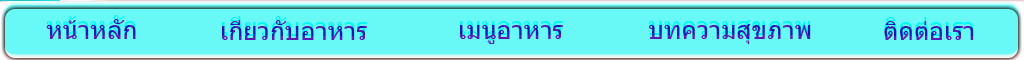
<style>
.page{position:relative;width:1024px;height:60px;background:#68f8f5}
.page>*{position:absolute;margin:0}
.t1{font:25px "Tahoma"}
</style>
<div class="page">
<p class="t1" style="left:46px;top:15px;width:90px;height:20px">หน้าหลัก</p>
<p class="t1" style="left:222px;top:16px;width:145px;height:20px">เก่ี่ยวกับอาหาร</p>
<p class="t1" style="left:884px;top:17px;width:90px;height:19px">ติดต่อเรา</p>
<p class="t1" style="left:460px;top:21px;width:103px;height:19px">เมนูอาหาร</p>
<p class="t1" style="left:649px;top:20px;width:162px;height:20px">บทความสุขภาพ</p>
</div>
